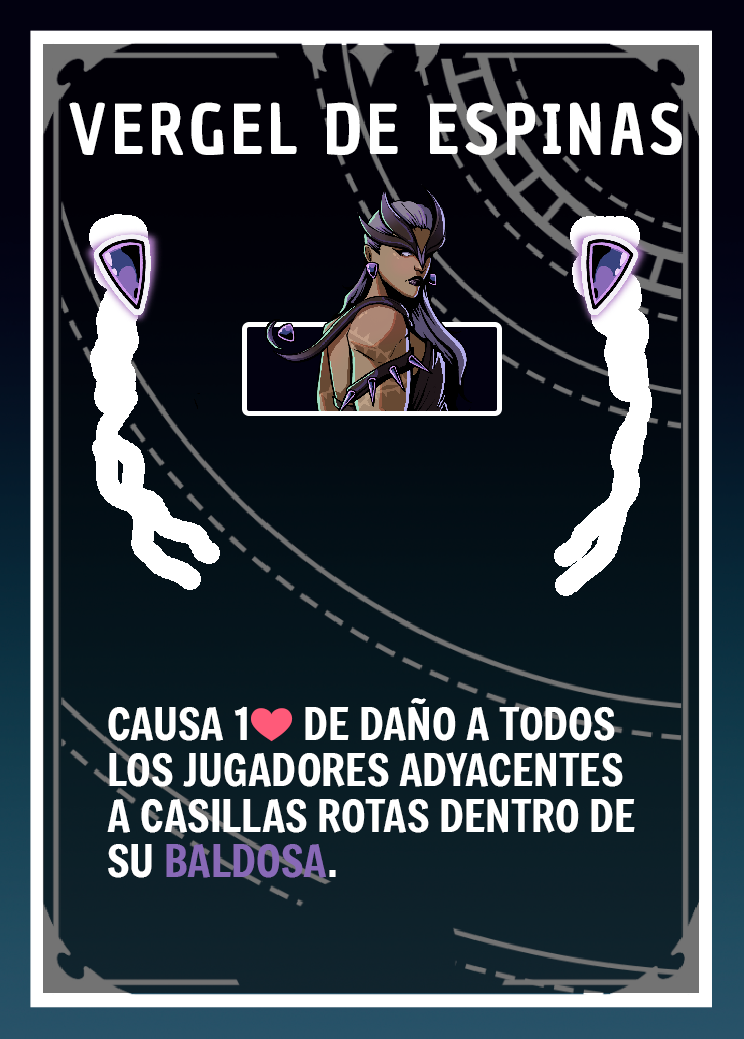
<style>
.page{position:relative;width:744px;height:1039px}
.page>*{position:absolute;margin:0}
.t1{font:66.7px "ChauPhilomeneOne-Regular";letter-spacing:0.075em;color:#ffffff}
.t2{font:43.7px/45.8px "Freeman-Regular";color:#ffffff}
.t3{font:43.7px/45.8px "EmojiOneColor";color:#ffffff}
.t4{font:43.7px/45.8px "Freeman-Regular";color:#8869b7}
</style>
<div class="page">
<p class="t1" style="left:69px;top:102px;width:613px;height:53px">VERGEL DE ESPINAS</p>
<p class="t2" style="left:107px;top:698px;width:528px;height:180px">CAUSA 1<span class="t3">❤️</span> DE DAÑO A TODOS LOS JUGADORES ADYACENTES A CASILLAS ROTAS DENTRO DE SU <span class="t4">BALDOSA</span>.</p>
</div>
